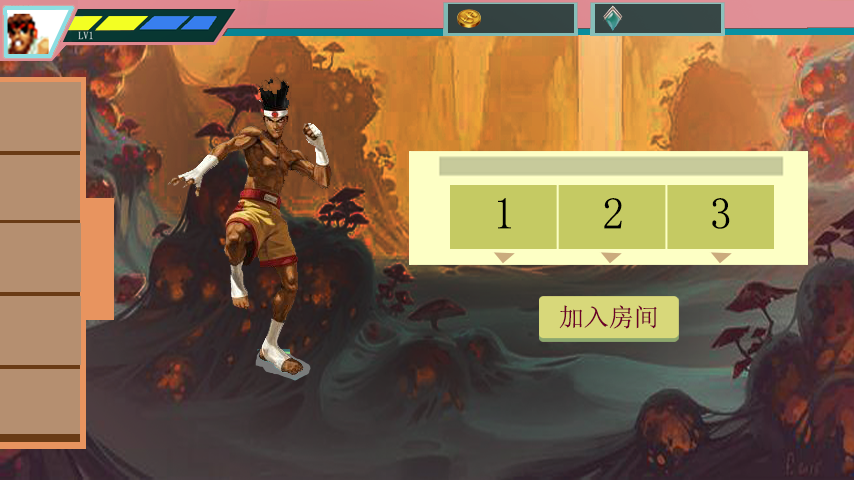
<style>
.page{position:relative;width:854px;height:480px}
.page>*{position:absolute;margin:0}
.t1{font:44.5px "SimSun";color:#000000}
.t2{font:25px "SimSun";color:#6c0029}
</style>
<div class="page">
<p class="t1" style="left:498px;top:198px;width:13px;height:31px">1</p>
<p class="t1" style="left:604px;top:198px;width:18px;height:31px">2</p>
<p class="t1" style="left:712px;top:198px;width:18px;height:31px">3</p>
<p class="t2" style="left:559px;top:305px;width:98px;height:24px">加入房间</p>
</div>
